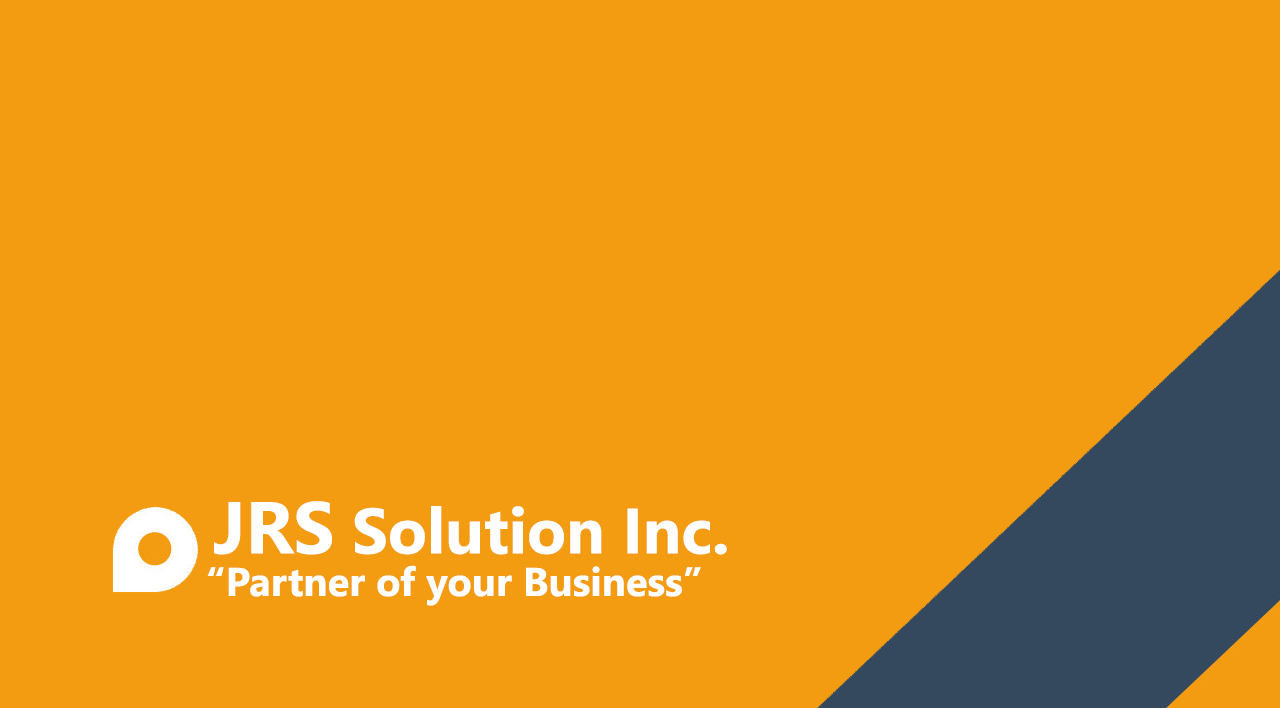
<style>
.page{position:relative;width:1280px;height:708px;background:#f39c11}
.page>*{position:absolute;margin:0}
.t1{font:64px "LeelawadeeUI-Bold";color:#ffffff}
.t2{font:80px "LeelawadeeUI-Bold";color:#ffffff}
.t3{font:73.3px "LeelawadeeUI-Bold";color:#ffffff}
.t4{font:40px "LeelawadeeUI-Bold";color:#ffffff}
</style>
<div class="page">
<p class="t1" style="left:214px;top:501px;width:513px;height:54px"><span class="t2"> </span><span class="t3">JRS</span> Solution Inc.</p>
<p class="t4" style="left:207px;top:565px;width:494px;height:41px">“Partner of your Business”</p>
</div>
